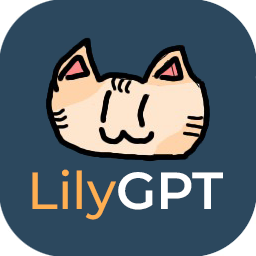
<style>
.page{position:relative;width:256px;height:256px;background:#2c485e}
.page>*{position:absolute;margin:0}
.t1{font:52px "Montserrat-Medium";color:#ffaf51}
.t2{font:52px "Montserrat-SemiBold";color:#ffffff}
</style>
<div class="page">
<p class="t1" style="left:32px;top:169px;width:191px;height:51px">Lily<span class="t2">GPT</span></p>
</div>
